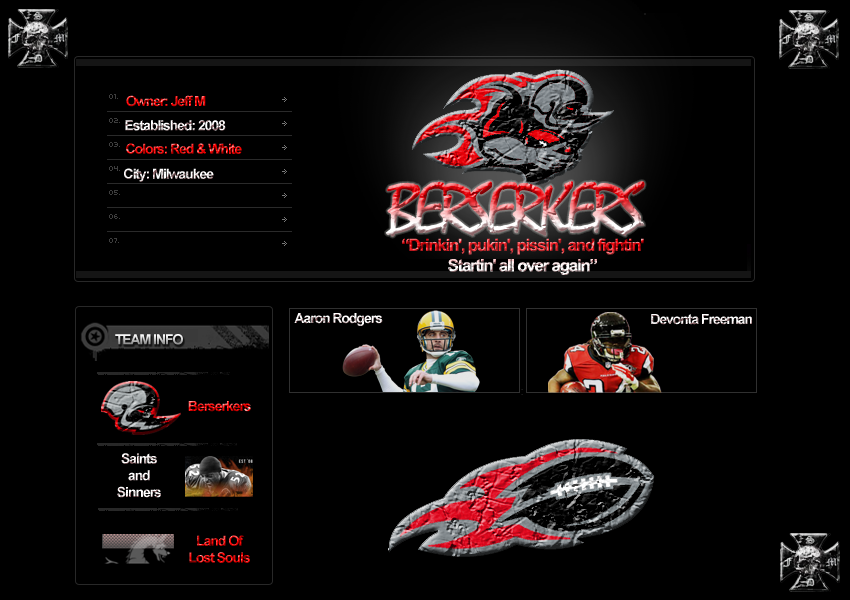
<style>
.page{position:relative;width:850px;height:600px;background:#000000}
.page>*{position:absolute;margin:0}
.t1{font:14px "Arial-BoldMT";letter-spacing:-0.075em}
.t2{font:72px "Mistral";letter-spacing:-0.075em}
.t3{font:17px "Arial-BoldMT";letter-spacing:-0.075em}
</style>
<div class="page">
<p class="t1" style="left:126px;top:95px;width:80px;height:12px">Owner: Jeff M</p>
<p class="t1" style="left:125px;top:120px;width:101px;height:11px">Established: 2008</p>
<p class="t1" style="left:126px;top:143px;width:116px;height:11px">Colors: Red &amp; White</p>
<p class="t1" style="left:124px;top:168px;width:90px;height:14px">City: Milwaukee</p>
<p class="t2" style="left:386px;top:181px;width:259px;height:56px">BERSERKERS</p>
<p class="t3" style="left:402px;top:238px;width:242px;height:37px;text-align:center">“Drinkin', pukin', pissin', and fightin'<br>Startin' all over again”</p>
<p class="t1" style="left:294px;top:313px;width:89px;height:13px">Aaron Rodgers</p>
<p class="t1" style="left:651px;top:314px;width:101px;height:11px">Devonta Freeman</p>
<p class="t1" style="left:115px;top:334px;width:68px;height:11px">TEAM INFO</p>
<p class="t1" style="left:188px;top:401px;width:63px;height:11px">Berserkers</p>
<p class="t1" style="left:117px;top:453px;width:44px;height:45px;text-align:center">Saints<br>and<br>Sinners</p>
<p class="t1" style="left:189px;top:535px;width:61px;height:28px;text-align:center">Land Of<br>Lost Souls</p>
</div>
